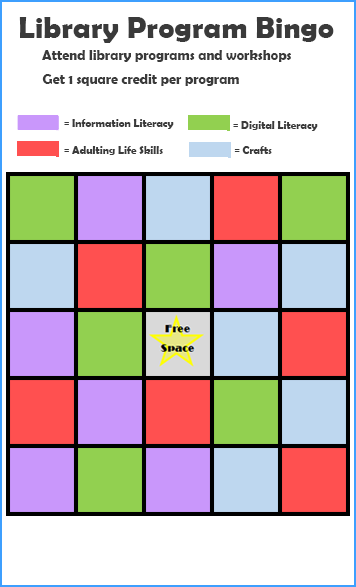
<style>
.page{position:relative;width:356px;height:587px;background:#ffffff}
.page>*{position:absolute;margin:0}
.t1{font:30px "BerlinSansFBDemi-Bold";letter-spacing:0.008em;color:#3a3a3a}
.t2{font:14px "BerlinSansFBDemi-Bold";color:#3a3a3a}
.t3{font:11px "BerlinSansFBDemi-Bold";color:#3a3a3a}
</style>
<div class="page">
<p class="t1" style="left:19px;top:17px;width:315px;height:26px">Library Program Bingo</p>
<p class="t2" style="left:42px;top:50px;width:249px;height:12px">Attend library programs and workshops</p>
<p class="t2" style="left:42px;top:74px;width:197px;height:12px">Get 1 square credit per program</p>
<p class="t3" style="left:64px;top:119px;width:110px;height:10px">= Information Literacy</p>
<p class="t3" style="left:233px;top:121px;width:85px;height:10px">= Digital Literacy</p>
<p class="t3" style="left:64px;top:146px;width:99px;height:9px">= Adulting Life Skills</p>
<p class="t3" style="left:234px;top:146px;width:38px;height:8px">= Crafts</p>
</div>
